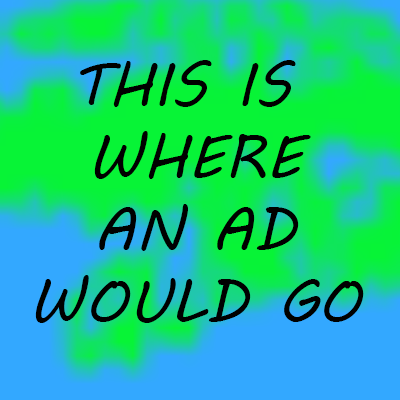
<style>
.page{position:relative;width:400px;height:400px}
.page>*{position:absolute;margin:0}
.t1{font:60px "MVBoli";color:#000000}
</style>
<div class="page">
<p class="t1" style="left:35px;top:60px;width:329px;height:263px;text-align:center">THIS IS <br>WHERE<br> AN AD <br>WOULD GO</p>
</div>
